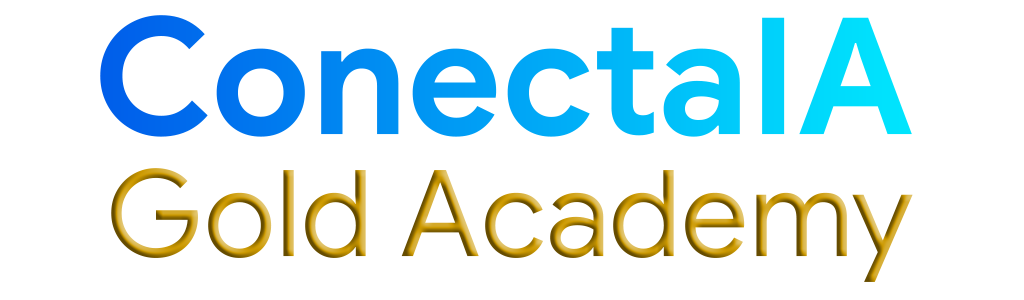
<style>
.page{position:relative;width:1024px;height:300px;background:#ffffff}
.page>*{position:absolute;margin:0}
.t1{font:162.3px "GoogleSans-Bold"}
.t2{font:120px "GoogleSans-Regular"}
</style>
<div class="page">
<p class="t1" style="left:100px;top:15px;width:812px;height:122px">ConectaIA</p>
<p class="t2" style="left:111px;top:168px;width:802px;height:114px">Gold Academy</p>
</div>
